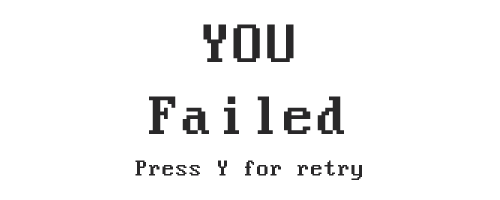
<style>
.page{position:relative;width:500px;height:200px;background:#ffffff}
.page>*{position:absolute;margin:0}
.t1{font:24px "PerfectDOSVGA437Win";color:#292829}
</style>
<div class="page">
<p class="t1" style="left:135px;top:160px;width:227px;height:20px">Press Y for retry</p>
</div>
